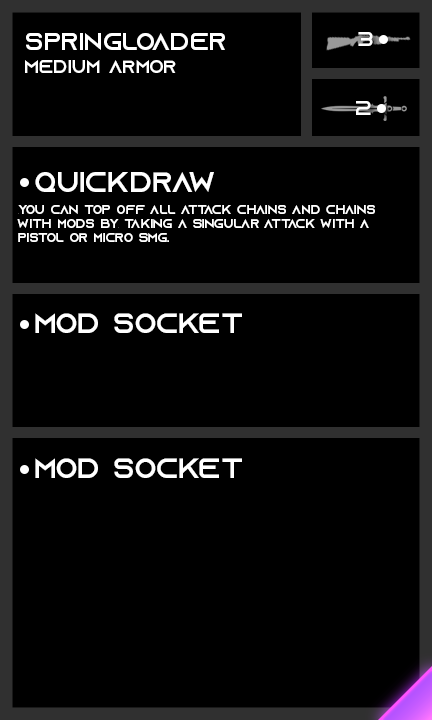
<style>
.page{position:relative;width:432px;height:720px;background:#000000}
.page>*{position:absolute;margin:0}
.t1{font:24px "AzonixRegular";color:#ffffff}
.t2{font:20px "AzonixRegular";color:#ffffff}
.t3{font:18px "AzonixRegular";color:#ffffff}
.t4{font:28px "AzonixRegular";color:#ffffff}
.t5{font:12px "AzonixRegular";color:#ffffff}
</style>
<div class="page">
<p class="t1" style="left:26px;top:33px;width:199px;height:17px">springloader</p>
<p class="t2" style="left:358px;top:32px;width:15px;height:14px">3</p>
<p class="t3" style="left:25px;top:60px;width:151px;height:13px">medium armor</p>
<p class="t2" style="left:356px;top:101px;width:15px;height:14px">2</p>
<p class="t4" style="left:35px;top:172px;width:179px;height:20px">quickdraw</p>
<p class="t5" style="left:17px;top:205px;width:358px;height:37px">you can top off all attack chains and chains<br>with mods by taking a singular attack with a<br>pistol or micro smg.</p>
<p class="t4" style="left:35px;top:313px;width:207px;height:20px">mod socket</p>
<p class="t4" style="left:35px;top:458px;width:207px;height:20px">mod socket</p>
</div>
